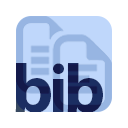
<style>
.page{position:relative;width:128px;height:128px;background:#ffffff}
.page>*{position:absolute;margin:0}
.t1{font:69px "MyriadPro-Bold";letter-spacing:-0.06em;color:#1a2b5d}
</style>
<div class="page">
<p class="t1" style="left:15px;top:63px;width:88px;height:50px">bib</p>
</div>
